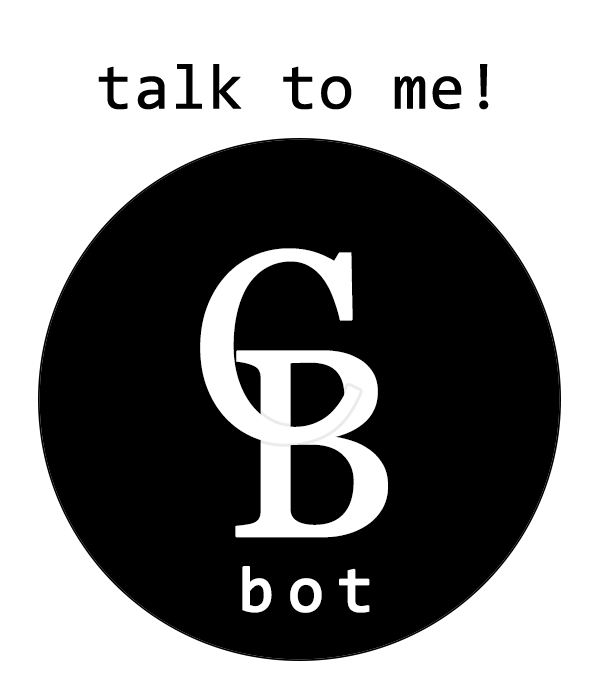
<style>
.page{position:relative;width:600px;height:700px;background:#ffffff}
.page>*{position:absolute;margin:0}
.t1{font:64px "Consolas";color:#000000;font-weight:bold}
.t2{font:266.6px "Georgia";color:#ffffff;font-weight:bold}
.t3{font:64px "Consolas";letter-spacing:0.2em;color:#ffffff;font-weight:bold}
</style>
<div class="page">
<p class="t1" style="left:98px;top:64px;width:391px;height:46px">talk to me!</p>
<p class="t2" style="left:200px;top:248px;width:160px;height:196px">C</p>
<p class="t2" style="left:235px;top:350px;width:153px;height:188px">B</p>
<p class="t3" style="left:242px;top:566px;width:128px;height:47px">bot</p>
</div>
